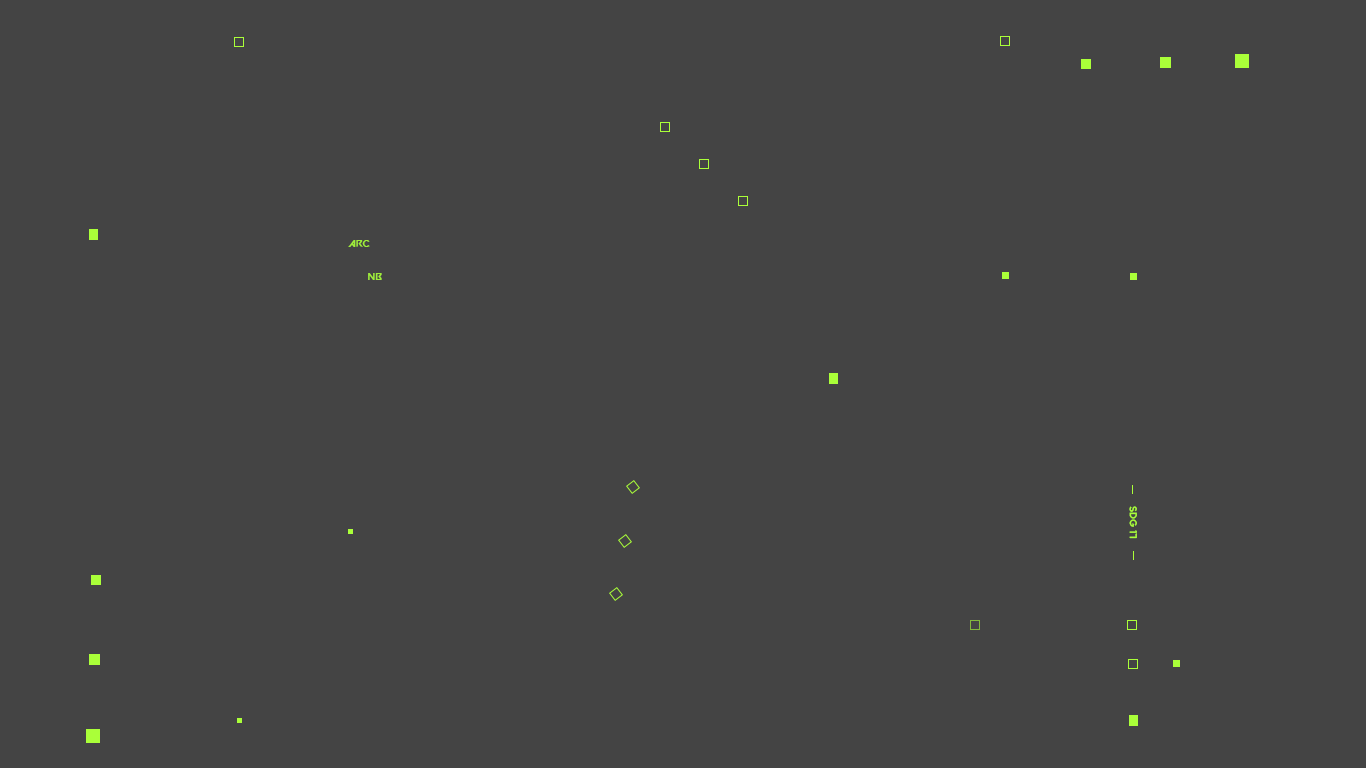
<style>
.page{position:relative;width:1366px;height:768px;background:#444444}
.page>*{position:absolute;margin:0}
.t1{font:10px "VALORANT-Regular";letter-spacing:0.005em;color:#aaff39}
.t2{font:10px "VALORANT-Regular";letter-spacing:0.01em;color:#aaff39}
</style>
<div class="page">
<p class="t1" style="left:348px;top:240px;width:22px;height:7px;opacity:0.87">ARC</p>
<p class="t2" style="left:368px;top:273px;width:14px;height:7px;opacity:0.87">NB</p>
<p class="t1" style="left:1129px;top:506px;width:8px;height:33px;rotate:90deg">SDG 17</p>
</div>
